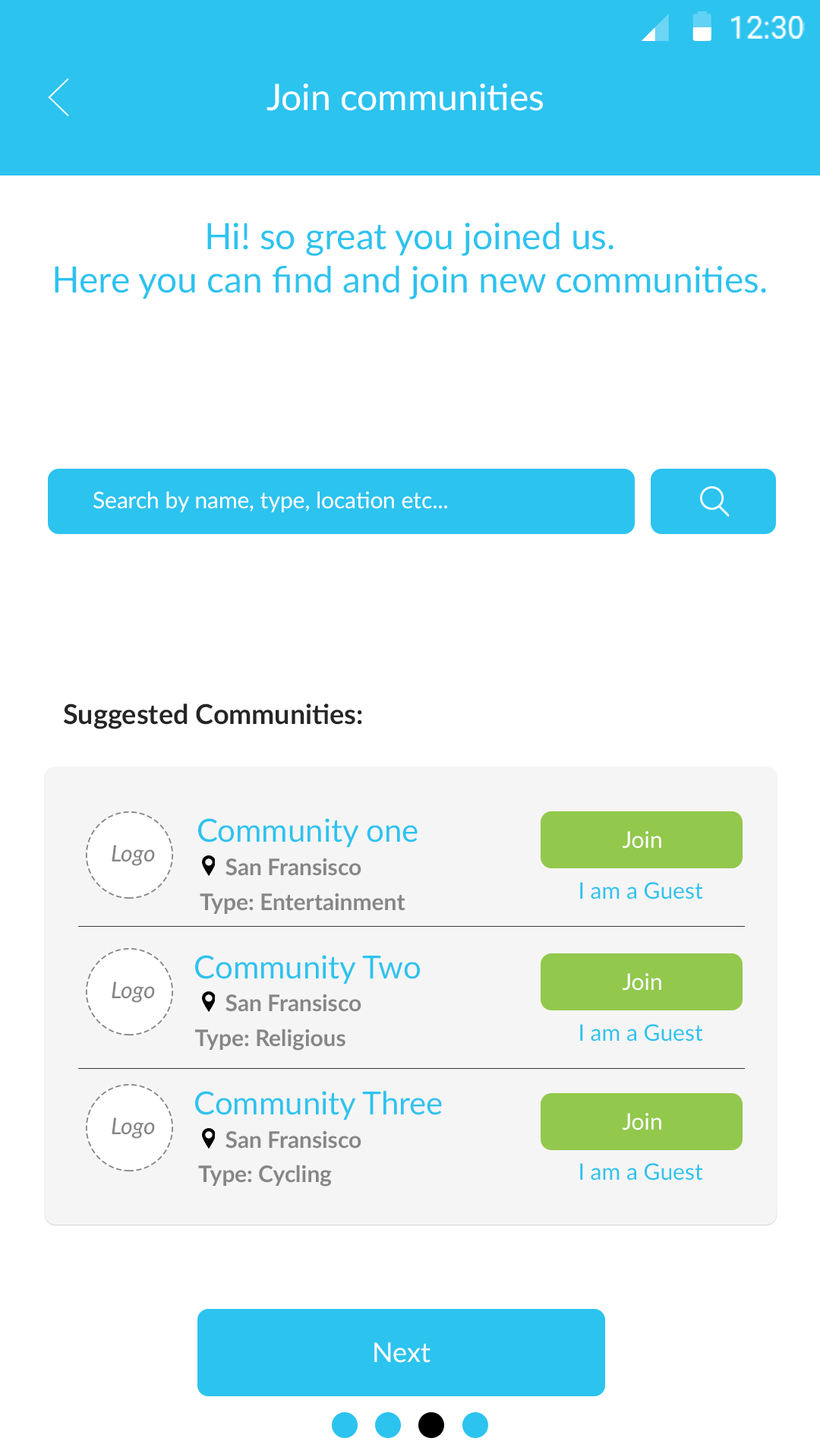
<style>
.page{position:relative;width:820px;height:1454px;background:#ffffff}
.page>*{position:absolute;margin:0}
.t1{font:30.4px "Roboto-Regular";color:#ffffff}
.t2{font:36.4px "Lato-Regular";color:#ffffff}
.t3{font:36.4px "Lato-Regular";color:#2cc3ef}
.t4{font:22.7px "Lato-Regular";color:#ffffff}
.t5{font:27.3px "Lato-Bold";color:#252525}
.t6{font:31.8px "Lato-Regular";color:#2cc3ef}
.t7{font:22.7px "Lato-MediumItalic";color:#868686}
.t8{font:22.7px "Lato-Bold";color:#868686}
.t9{font:22.7px "Lato-Regular";color:#2cc3ef}
.t10{font:27.3px "Lato-Regular";color:#ffffff}
</style>
<div class="page">
<p class="t1" style="left:731px;top:16px;width:74px;height:23px">12:30</p>
<p class="t2" style="left:267px;top:83px;width:276px;height:28px">Join communities</p>
<p class="t3" style="left:55px;top:222px;width:711px;height:77px;text-align:center">Hi! so great you joined us.<br>Here you can find and join new communities.</p>
<p class="t4" style="left:93px;top:491px;width:354px;height:22px">Search by name, type, location etc...</p>
<p class="t5" style="left:63px;top:703px;width:299px;height:26px">Suggested Communities:</p>
<p class="t6" style="left:198px;top:818px;width:220px;height:30px">Community one</p>
<p class="t4" style="left:623px;top:831px;width:39px;height:17px">Join</p>
<p class="t7" style="left:112px;top:845px;width:43px;height:21px">Logo</p>
<p class="t8" style="left:226px;top:857px;width:136px;height:19px">San Fransisco</p>
<p class="t9" style="left:580px;top:882px;width:123px;height:17px">I am a Guest</p>
<p class="t8" style="left:200px;top:892px;width:206px;height:22px">Type: Entertainment</p>
<p class="t6" style="left:195px;top:955px;width:225px;height:29px">Community Two</p>
<p class="t4" style="left:623px;top:973px;width:39px;height:17px">Join</p>
<p class="t7" style="left:112px;top:981px;width:43px;height:22px">Logo</p>
<p class="t8" style="left:226px;top:993px;width:136px;height:19px">San Fransisco</p>
<p class="t9" style="left:580px;top:1024px;width:123px;height:17px">I am a Guest</p>
<p class="t8" style="left:195px;top:1028px;width:151px;height:22px">Type: Religious</p>
<p class="t6" style="left:195px;top:1091px;width:247px;height:29px">Community Three</p>
<p class="t7" style="left:112px;top:1117px;width:43px;height:22px">Logo</p>
<p class="t4" style="left:623px;top:1113px;width:39px;height:17px">Join</p>
<p class="t8" style="left:226px;top:1130px;width:136px;height:18px">San Fransisco</p>
<p class="t8" style="left:198px;top:1164px;width:134px;height:22px">Type: Cycling</p>
<p class="t9" style="left:580px;top:1163px;width:123px;height:17px">I am a Guest</p>
<p class="t10" style="left:374px;top:1342px;width:57px;height:21px">Next</p>
</div>
